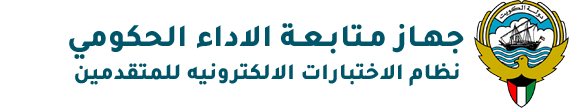
<style>
.page{position:relative;width:576px;height:108px;background:#ffffff}
.page>*{position:absolute;margin:0}
.t1{font:32px "Tajawal-ExtraBold";color:#015569;font-variant:small-caps}
.t2{font:23px "Tajawal-ExtraBold";color:#015569;font-variant:small-caps}
</style>
<div class="page">
<p class="t1" style="left:69px;top:23px;width:395px;height:36px">جهـاز مـتابـعـة الاداء الحكومي</p>
<p class="t2" style="left:75px;top:63px;width:384px;height:24px">نظام الاختبارات الالكترونيه للمتقدمين</p>
</div>
